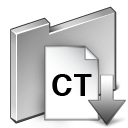
<style>
.page{position:relative;width:128px;height:128px;background:#ffffff}
.page>*{position:absolute;margin:0}
.t1{font:30px "Helvetica-Bold";letter-spacing:0.025em;color:#000000}
</style>
<div class="page">
<p class="t1" style="left:52px;top:74px;width:40px;height:22px">CT</p>
</div>
